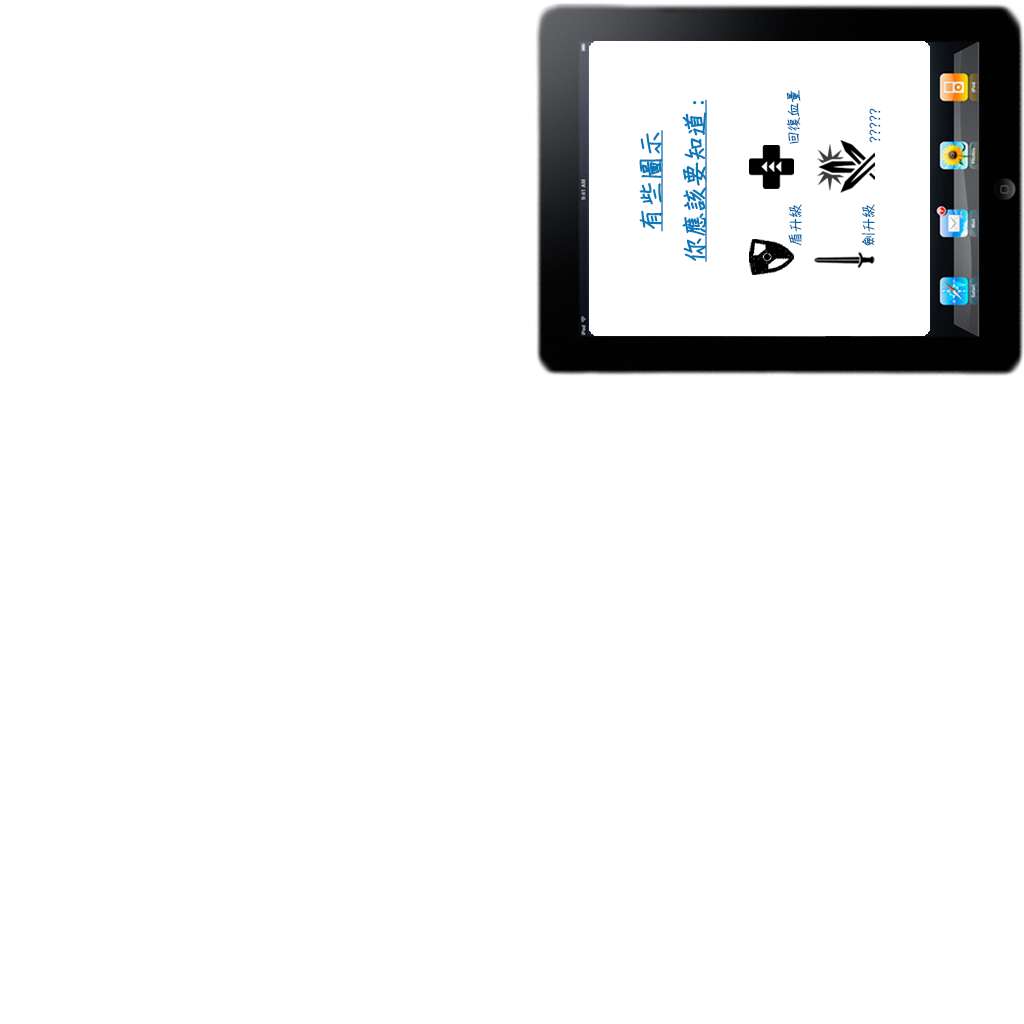
<style>
.page{position:relative;width:1024px;height:1024px;background:#ffffff}
.page>*{position:absolute;margin:0}
.t1{font:25px "DFChu-W4-WINP-BF";color:#0979ba;font-weight:bold;text-decoration:underline}
.t2{font:14.3px "DFChu-W4-WIN-BF";color:#0a65a5}
</style>
<div class="page">
<p class="t1" style="left:639px;top:99px;width:68px;height:163px;text-align:center;rotate:-90deg">有些圖示<br>你應該要知道:</p>
<p class="t2" style="left:786px;top:90px;width:15px;height:54px;rotate:-90deg">回復血量</p>
<p class="t2" style="left:869px;top:108px;width:12px;height:35px;rotate:-90deg">?????</p>
<p class="t2" style="left:788px;top:204px;width:14px;height:42px;rotate:-90deg">盾升級</p>
<p class="t2" style="left:861px;top:204px;width:14px;height:42px;rotate:-90deg">劍升級</p>
</div>
